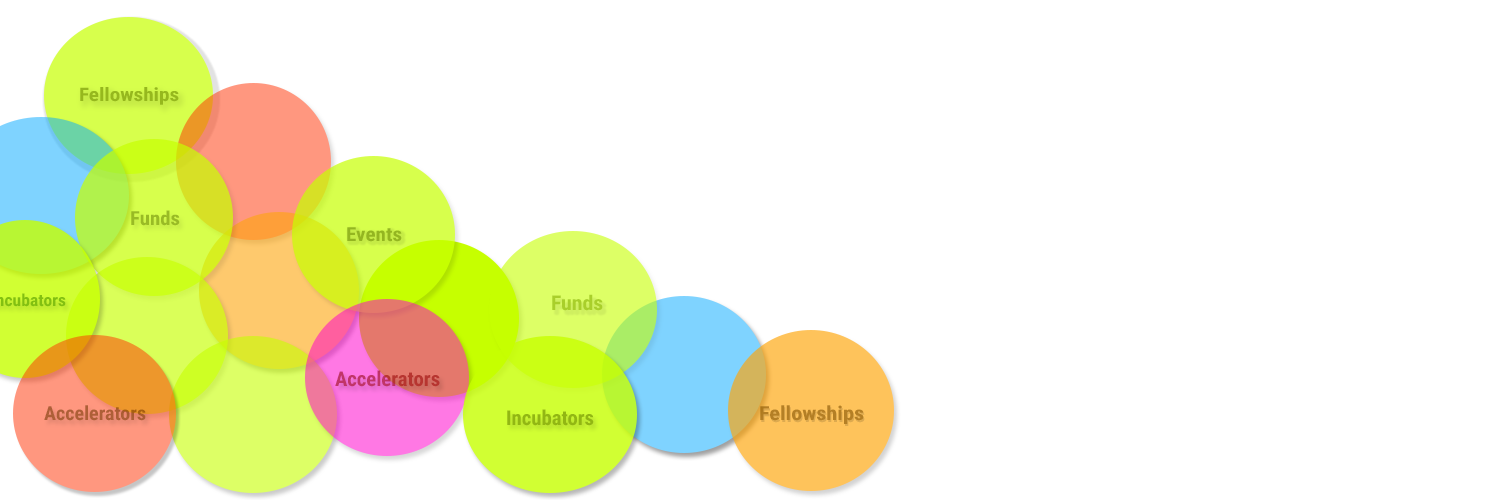
<style>
.page{position:relative;width:1500px;height:500px;background:#ffffff}
.page>*{position:absolute;margin:0}
.t1{font:18.6px "RobotoCondensed-Bold";color:#96b81d;scale:1.14 1}
.t2{font:19.3px "RobotoCondensed-Bold";color:#99bb25;scale:1.08 1}
.t3{font:19.5px "RobotoCondensed-Bold";color:#94b620;scale:1.08 1}
.t4{font:20.2px "RobotoCondensed-Bold";color:#a9cf2b;scale:1.07 1}
.t5{font:20.4px "RobotoCondensed-Bold"}
.t6{font:19.5px "RobotoCondensed-Bold";color:#ae5f37}
.t7{font:20.4px "RobotoCondensed-Bold";color:#92b713}
.t8{font:19.5px "RobotoCondensed-Bold";color:#b47f25;scale:1.14 1}
</style>
<div class="page">
<p class="t1" style="left:80px;top:87px;width:99px;height:18px">Fellowships</p>
<p class="t2" style="left:131px;top:210px;width:49px;height:16px">Funds</p>
<p class="t3" style="left:347px;top:227px;width:55px;height:15px">Events</p>
<p class="t4" style="left:552px;top:294px;width:51px;height:17px">Funds</p>
<p class="t5" style="left:335px;top:370px;width:105px;height:17px">Accelerators</p>
<p class="t6" style="left:44px;top:405px;width:102px;height:16px">Accelerators</p>
<p class="t7" style="left:507px;top:409px;width:87px;height:17px">Incubators</p>
<p class="t8" style="left:760px;top:405px;width:104px;height:19px">Fellowships</p>
</div>
